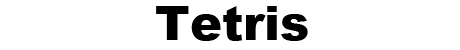
<style>
.page{position:relative;width:460px;height:50px;background:#ffffff}
.page>*{position:absolute;margin:0}
.t1{font:48px "Arial-Black";color:#000000}
</style>
<div class="page">
<p class="t1" style="left:156px;top:6px;width:152px;height:35px">Tetris</p>
</div>
